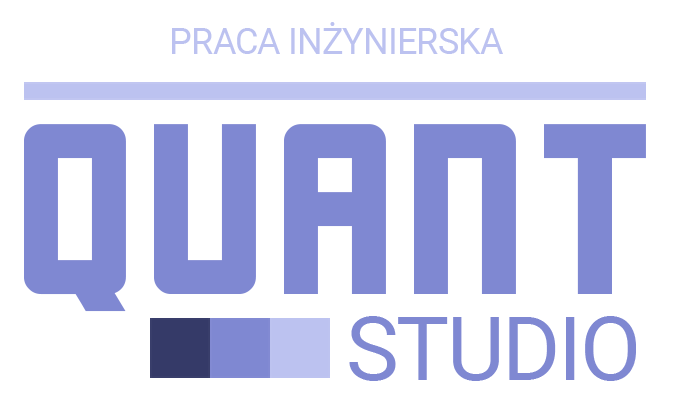
<style>
.page{position:relative;width:674px;height:414px;background:#ffffff}
.page>*{position:absolute;margin:0}
.t1{font:36px "Roboto-Regular";letter-spacing:-0.025em;color:#bcc2f0;text-transform:uppercase}
.t2{font:236px "Cornerstone";letter-spacing:-0.025em;color:#7f88d2}
.t3{font:88.6px "Roboto-Regular";letter-spacing:-0.025em;color:#7f88d2;text-transform:uppercase}
</style>
<div class="page">
<p class="t1" style="left:172px;top:22px;width:331px;height:32px">Praca inżynierska</p>
<p class="t2" style="left:24px;top:124px;width:622px;height:188px">QUANT</p>
<p class="t3" style="left:349px;top:316px;width:287px;height:65px">studio</p>
</div>
